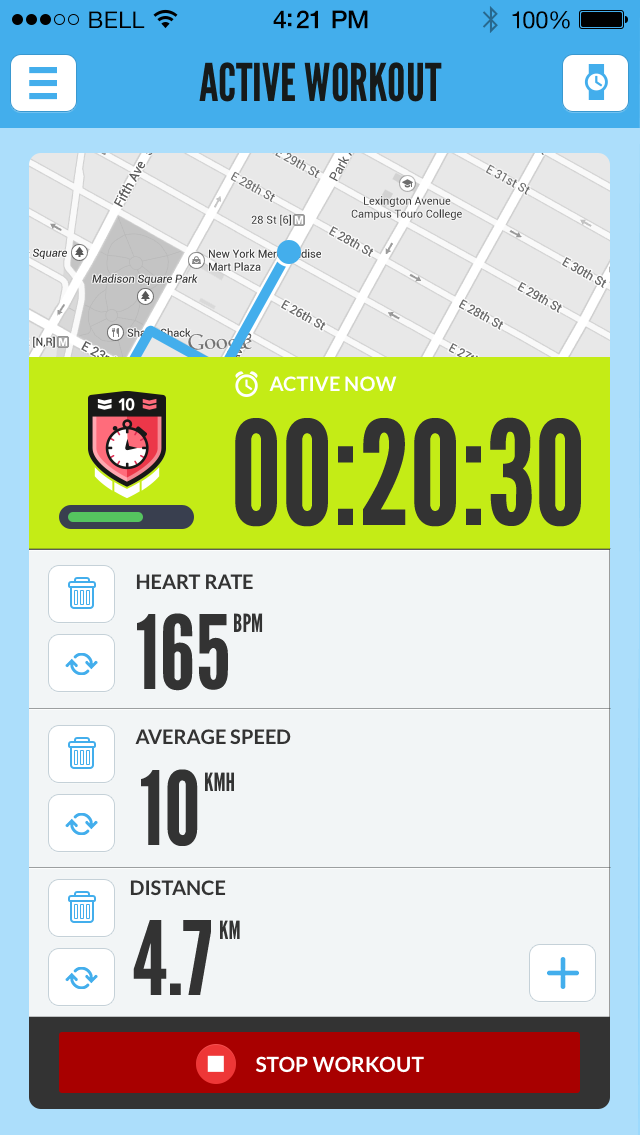
<style>
.page{position:relative;width:640px;height:1135px;background:#f2f5f6}
.page>*{position:absolute;margin:0}
.t1{font:23px "HelveticaNeue";letter-spacing:0.02em;color:#000000}
.t2{font:25px "HelveticaNeue-Medium";letter-spacing:-0.02em;color:#000000}
.t3{font:24px "HelveticaNeue";letter-spacing:-0.02em;color:#010101}
.t4{font:52px "LeagueGothic-Regular";color:#161a1a;text-transform:uppercase}
.t5{font:20px "Lato-Bold";color:#ffffff}
.t6{font:144px "LeagueGothic-Regular";color:#333333;text-transform:uppercase}
.t7{font:20px "Lato-Bold";color:#333333}
.t8{font:102px "LeagueGothic-Regular";color:#333333;text-transform:uppercase}
.t9{font:25px "LeagueGothic-Regular";color:#333333;text-transform:uppercase}
.t10{font:21px "Lato-Bold";color:#ffffff}
</style>
<div class="page">
<p class="t1" style="left:89px;top:11px;width:56px;height:17px">BELL</p>
<p class="t2" style="left:273px;top:10px;width:95px;height:19px">4:21 PM</p>
<p class="t3" style="left:512px;top:11px;width:58px;height:18px">100%</p>
<p class="t4" style="left:199px;top:62px;width:243px;height:40px">ACTIVE WORKOUT</p>
<p class="t5" style="left:269px;top:376px;width:128px;height:16px">ACTIVE NOW</p>
<p class="t6" style="left:235px;top:417px;width:346px;height:110px">00:20:30</p>
<p class="t7" style="left:136px;top:574px;width:117px;height:15px">HEART RATE</p>
<p class="t8" style="left:137px;top:613px;width:91px;height:78px">165</p>
<p class="t9" style="left:234px;top:613px;width:29px;height:19px">BPM</p>
<p class="t7" style="left:135px;top:729px;width:156px;height:16px">AVERAGE SPEED</p>
<p class="t8" style="left:141px;top:769px;width:57px;height:77px">10</p>
<p class="t9" style="left:205px;top:772px;width:29px;height:19px">KMH</p>
<p class="t7" style="left:130px;top:880px;width:96px;height:16px">DISTANCE</p>
<p class="t8" style="left:133px;top:920px;width:78px;height:75px">4.7</p>
<p class="t9" style="left:220px;top:920px;width:20px;height:19px">KM</p>
<p class="t10" style="left:256px;top:1056px;width:168px;height:17px">STOP WORKOUT</p>
</div>
